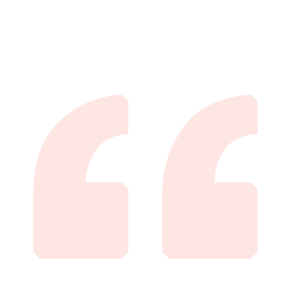
<style>
.page{position:relative;width:296px;height:297px;background:#ffffff}
.page>*{position:absolute;margin:0}
.t1{font:595.2px "Helvetica";color:#fee6e2;font-weight:bold;scale:1.32 1}
</style>
<div class="page">
<p class="t1" style="left:33px;top:94px;width:225px;height:165px">“</p>
</div>
